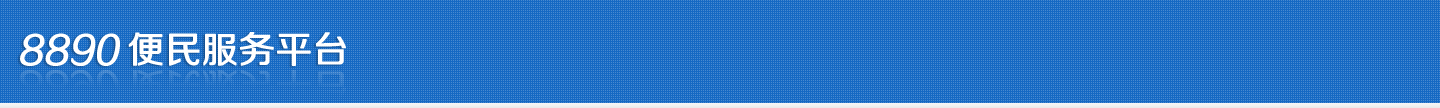
<style>
.page{position:relative;width:1440px;height:108px;background:#1569c3}
.page>*{position:absolute;margin:0}
.t1{font:36px "FZZHJW--GB1-0";color:#ffffff;font-weight:bold;font-style:italic}
.t2{font:36px "FZZHJW--GB1-0";color:#ffffff;font-weight:bold}
</style>
<div class="page">
<p class="t1" style="left:20px;top:33px;width:100px;height:33px">8890</p>
<p class="t2" style="left:128px;top:32px;width:218px;height:34px"><span class="t1"> </span>便民服务平台</p>
</div>
